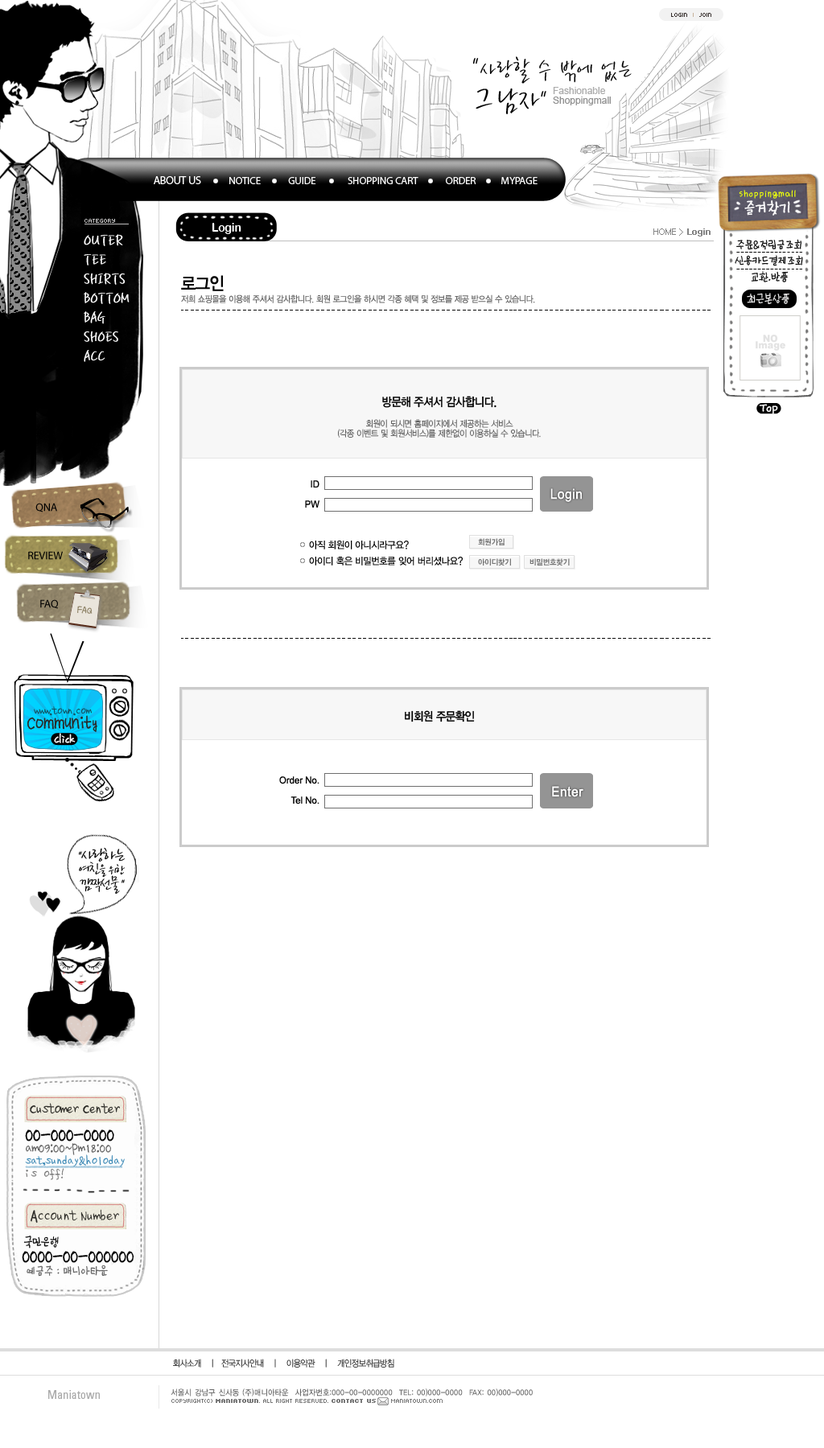
<style>
.page{position:relative;width:824px;height:1448px;background:#ffffff}
.page>*{position:absolute;margin:0}
.t1{font:6.4px "Kroeger0555";color:#362f2d}
.t2{font:6.4px "Kroeger0555";color:#c7b299}
.t3{font:28.2px/11.9px "YDBomnalM";color:#000000;scale:0.85 1}
.t4{font:41.8px/32.8px "YDBomnalM";color:#000000;scale:0.85 1}
.t5{font:36.2px/32.8px "YDBomnalM";color:#000000;scale:0.85 1}
.t6{font:28.2px/32.8px "YDBomnalM";color:#000000;scale:0.85 1}
.t7{font:9.7px/9.5px "ArialMT";color:#909090}
.t8{font:9.7px/9.5px "ArialMT";color:#aaaaaa}
.t9{font:10.5px "MyriadPro-Regular";letter-spacing:-0.01em;color:#ffffff;text-transform:uppercase}
.t10{font:11.3px "MyriadPro-Regular";letter-spacing:-0.01em;color:#ffffff;text-transform:uppercase}
.t11{font:10.5px "YDSDJ";letter-spacing:-0.02em;color:#ebff0a;scale:0.9 1}
.t12{font:6.4px "Kroeger0555";color:#bfbebe;text-decoration:underline}
.t13{font:12.1px "ArialRoundedMTBold";color:#ffffff;scale:0.9 1}
.t14{font:8.8px "Dotum";letter-spacing:-0.08em;color:#858585}
.t15{font:8.8px "Dotum";letter-spacing:-0.08em;color:#858585;font-weight:bold}
.t16{font:19.3px/19.3px "YDBomnalM";color:#ffffff;font-weight:bold;scale:0.85 1}
.t17{font:13.5px/16.1px "YDSDJ";letter-spacing:-0.135em;color:#000000;scale:0.95 1}
.t18{font:17.7px "YDIYGO330";letter-spacing:-0.03em;color:#000000;scale:0.9 1}
.t19{font:13.5px "YDSDJ";letter-spacing:-0.135em;color:#fffefe;scale:0.95 1}
.t20{font:8.8px "YDIYGO320";letter-spacing:-0.03em;color:#676767;scale:0.9 1}
.t21{font:8.8px/9.7px "YDIYGO310";letter-spacing:-0.02em;color:#606060;scale:0.9 1}
.t22{font:12.1px/11.3px "YDIYGO330";letter-spacing:-0.04em;color:#010101;scale:0.9 1}
.t23{font:9.7px/20.1px "ArialMT";color:#000000;scale:0.95 1}
.t24{font:11.3px "MyriadPro-Regular";letter-spacing:-0.01em;color:#000000;text-transform:uppercase}
.t25{font:9.7px/16.1px "YDIYGO330";letter-spacing:-0.04em;color:#000000;scale:0.95 1}
.t26{font:11.3px "YDSDJ";letter-spacing:-0.07em;color:#91856a;font-weight:bold;scale:0.8 1}
.t27{font:10.5px/14.5px "¹ÎÀ±ÈñÃ¼";letter-spacing:-0.02em;color:#125362;font-weight:bold;scale:0.9 1}
.t28{font:16.1px/14.5px "¹Ú¸íÈñÃ¼";letter-spacing:-0.02em;color:#292824;font-weight:bold;scale:0.9 1}
.t29{font:12.1px "YDIYGO330";letter-spacing:-0.04em;color:#010101;scale:0.9 1}
.t30{font:19.3px "¹ÎÀ±ÈñÃ¼";letter-spacing:-0.04em;color:#000000;font-weight:bold;scale:0.8 1}
.t31{font:12.9px "¹ÎÀ±ÈñÃ¼";color:#5d5d5d;scale:0.9 1}
.t32{font:10.9px/12.9px "¹ÎÀ±ÈñÃ¼";color:#3283b2;scale:0.94 1}
.t33{font:10.9px/12.9px "¹ÎÀ±ÈñÃ¼";color:#717171;scale:0.94 1}
.t34{font:14.5px "YDSDJ";letter-spacing:-0.12em;color:#000000;scale:0.9 1}
.t35{font:14.5px "YDSDJ";letter-spacing:-0.12em;color:#5d5d5d;scale:0.9 1}
.t36{font:8.8px "YDIYGO310";letter-spacing:-0.03em;color:#393939;scale:0.9 1}
.t37{font:11.6px "Univers-Condensed";color:#aaaaaa}
.t38{font:8px "YDIYGO130-KSCPC-EUC-H";letter-spacing:-0.05em;color:#666666;scale:0.9 1}
.t39{font:6.4px "Kroeger0555";color:#7a7a7a}
.t40{font:6.4px "Kroeger0555";color:#7a7a7a;font-weight:bold}
</style>
<div class="page">
<p class="t1" style="left:671px;top:13px;width:40px;height:4px">Login  <span class="t2">I</span>  Join</p>
<p class="t3" style="left:472px;top:56px;width:159px;height:58px">"사랑할 수 밖에 없는<br><span class="t4">그</span><span class="t5">남자</span><span class="t6">"</span></p>
<p class="t7" style="left:553px;top:87px;width:57px;height:18px"><span class="t8">Fashionable<br></span>Shoppingmall</p>
<p class="t9" style="left:154px;top:176px;width:383px;height:8px"><span class="t10">about US</span>             Notice             Guide               SHOPPING Cart             Order            Mypage</p>
<p class="t11" style="left:738px;top:190px;width:57px;height:9px">shoppingmall</p>
<p class="t12" style="left:84px;top:219px;width:45px;height:5px">category</p>
<p class="t13" style="left:212px;top:223px;width:29px;height:11px">Login</p>
<p class="t14" style="left:653px;top:228px;width:57px;height:8px">HOME &gt; <span class="t15">Login</span></p>
<p class="t16" style="left:84px;top:234px;width:45px;height:128px">OUTER<br>TEE<br>SHIRTS<br>BOTTOM<br>BAG<br>SHOES<br>ACC</p>
<p class="t17" style="left:734px;top:239px;width:69px;height:43px;text-align:center;rotate:-1deg">주문&amp;적립금조회<br>신용카드결제조회<br>교환.반품</p>
<p class="t18" style="left:181px;top:275px;width:43px;height:16px">로그인</p>
<p class="t19" style="left:746px;top:293px;width:43px;height:11px;rotate:-1deg">최근본상품</p>
<p class="t20" style="left:181px;top:294px;width:354px;height:9px">저희 쇼핑몰을 이용해 주셔서 감사합니다. 회원 로그인을 하시면 각종 혜택 및 정보를 제공 받으실 수 있습니다.</p>
<p class="t21" style="left:338px;top:396px;width:203px;height:42px;text-align:center"><span class="t22">방문해 주셔서 감사합니다.<br><br></span>회원이 되시면 홈페이지에서 제공하는 서비스<br>(각종 이벤트 및 회원서비스)를 제한없이 이용하실 수 있습니다.</p>
<p class="t23" style="left:305px;top:480px;width:14px;height:28px;text-align:right">ID<br>PW</p>
<p class="t24" style="left:35px;top:503px;width:22px;height:9px">QNA</p>
<p class="t25" style="left:309px;top:541px;width:153px;height:24px">아직 회원이 아니시라구요?<br>아이디 혹은 비밀번호를 잊어 버리셨나요?</p>
<p class="t24" style="left:28px;top:551px;width:35px;height:9px">REVIEW</p>
<p class="t24" style="left:40px;top:599px;width:18px;height:10px">FAQ</p>
<p class="t26" style="left:77px;top:606px;width:15px;height:8px;rotate:6deg">FAQ</p>
<p class="t27" style="left:27px;top:706px;width:70px;height:26px;text-align:center">www.town.com<br><span class="t28">Community</span></p>
<p class="t29" style="left:405px;top:710px;width:70px;height:12px">비회원 주문확인</p>
<p class="t23" style="left:279px;top:776px;width:40px;height:28px;text-align:right">Order No.<br>Tel No.</p>
<p class="t30" style="left:25px;top:1129px;width:89px;height:12px">00-000-0000</p>
<p class="t31" style="left:26px;top:1143px;width:85px;height:12px">am09:00~pm18:00</p>
<p class="t32" style="left:25px;top:1154px;width:100px;height:26px">sat,sunday&amp;holoday<br><span class="t33">is off!</span></p>
<p class="t34" style="left:23px;top:1235px;width:36px;height:13px">국민은행</p>
<p class="t30" style="left:22px;top:1251px;width:112px;height:12px">0000-00-000000</p>
<p class="t35" style="left:27px;top:1264px;width:81px;height:12px">예금주 : 매니아타운</p>
<p class="t36" style="left:173px;top:1359px;width:221px;height:8px">회사소개    |   전국지사안내    |    이용약관    |    개인정보취급방침</p>
<p class="t37" style="left:48px;top:1390px;width:52px;height:9px">Maniatown</p>
<p class="t38" style="left:171px;top:1388px;width:361px;height:8px">서울시 강남구 신사동 (주)매니아타운  사업자번호:000-00-0000000  TEL: 00)000-0000  FAX: 00)000-0000</p>
<p class="t39" style="left:171px;top:1399px;width:271px;height:4px">COPYRIGHT(C) <span class="t40">Maniatown</span>. ALL RIGHT RESERVED. <span class="t40">Contact Us   </span>  Maniatown.com</p>
</div>
